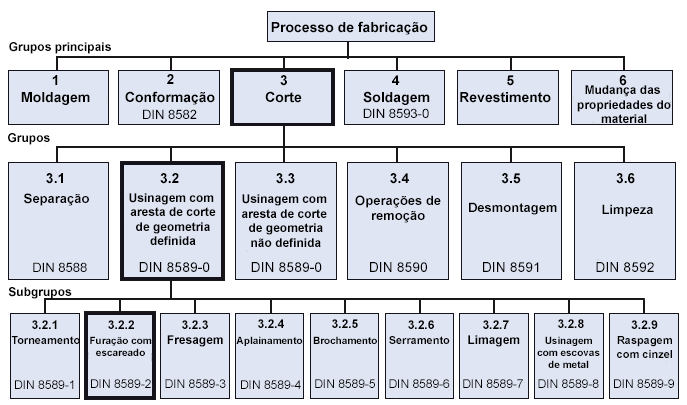
<style>
.page{position:relative;width:687px;height:405px;background:#dfe5f2}
.page>*{position:absolute;margin:0}
.t1{font:14px "Arial-BoldMT";color:#000000}
.t2{font:12px "Arial-BoldMT";color:#000000}
.t3{font:13px "ArialMT";color:#000000}
.t4{font:13px "Arial-BoldMT";color:#000000}
.t5{font:14px "ArialMT";color:#000000}
.t6{font:11px "Arial-BoldMT";color:#000000}
.t7{font:10px "Arial-BoldMT";color:#000000}
.t8{font:12px "ArialMT";color:#000000}
</style>
<div class="page">
<p class="t1" style="left:271px;top:21px;width:157px;height:14px">Processo de fabricação</p>
<p class="t2" style="left:9px;top:42px;width:102px;height:12px">Grupos principais</p>
<p class="t1" style="left:52px;top:75px;width:6px;height:10px">1</p>
<p class="t1" style="left:167px;top:74px;width:7px;height:10px">2</p>
<p class="t1" style="left:280px;top:75px;width:7px;height:11px">3</p>
<p class="t1" style="left:392px;top:75px;width:8px;height:10px">4</p>
<p class="t1" style="left:507px;top:75px;width:7px;height:11px">5</p>
<p class="t1" style="left:619px;top:75px;width:8px;height:11px">6</p>
<p class="t2" style="left:577px;top:85px;width:94px;height:38px;text-align:center">Mudança das <br>propriedades do<br>material</p>
<p class="t1" style="left:21px;top:92px;width:69px;height:13px">Moldagem</p>
<p class="t1" style="left:125px;top:91px;width:90px;height:14px">Conformação</p>
<p class="t1" style="left:265px;top:91px;width:37px;height:12px">Corte</p>
<p class="t1" style="left:363px;top:91px;width:67px;height:14px">Soldagem</p>
<p class="t1" style="left:460px;top:92px;width:91px;height:11px">Revestimento</p>
<p class="t3" style="left:143px;top:109px;width:54px;height:10px">DIN 8582</p>
<p class="t3" style="left:363px;top:108px;width:66px;height:10px">DIN 8593-0</p>
<p class="t2" style="left:8px;top:133px;width:42px;height:12px">Grupos</p>
<p class="t1" style="left:46px;top:173px;width:17px;height:11px">3.1</p>
<p class="t1" style="left:160px;top:173px;width:19px;height:11px">3.2</p>
<p class="t1" style="left:276px;top:173px;width:19px;height:11px">3.3</p>
<p class="t1" style="left:390px;top:173px;width:19px;height:11px">3.4</p>
<p class="t1" style="left:501px;top:173px;width:20px;height:11px">3.5</p>
<p class="t1" style="left:616px;top:173px;width:19px;height:11px">3.6</p>
<p class="t4" style="left:24px;top:193px;width:65px;height:13px">Separação</p>
<p class="t2" style="left:129px;top:193px;width:87px;height:52px;text-align:center">Usinagem com <br>aresta de corte<br>de geometria<br>definida</p>
<p class="t2" style="left:242px;top:194px;width:85px;height:53px;text-align:center">Usinagem com <br>aresta de corte <br>de geometria<br>não definida</p>
<p class="t4" style="left:355px;top:195px;width:86px;height:28px;text-align:center">Operações de<br>remoção</p>
<p class="t4" style="left:469px;top:202px;width:88px;height:13px">Desmontagem</p>
<p class="t4" style="left:602px;top:204px;width:51px;height:13px">Limpeza</p>
<p class="t3" style="left:33px;top:262px;width:54px;height:10px">DIN 8588</p>
<p class="t5" style="left:139px;top:262px;width:71px;height:10px">DIN 8589-0</p>
<p class="t5" style="left:251px;top:262px;width:71px;height:10px">DIN 8589-0</p>
<p class="t5" style="left:370px;top:262px;width:57px;height:10px">DIN 8590</p>
<p class="t5" style="left:483px;top:262px;width:56px;height:10px">DIN 8591</p>
<p class="t5" style="left:596px;top:262px;width:58px;height:10px">DIN 8592</p>
<p class="t2" style="left:8px;top:287px;width:64px;height:12px">Subgrupos</p>
<p class="t2" style="left:32px;top:320px;width:25px;height:9px">3.2.1</p>
<p class="t2" style="left:108px;top:320px;width:26px;height:9px">3.2.2</p>
<p class="t2" style="left:182px;top:320px;width:26px;height:9px">3.2.3</p>
<p class="t2" style="left:258px;top:319px;width:26px;height:9px">3.2.4</p>
<p class="t2" style="left:332px;top:319px;width:26px;height:9px">3.2.5</p>
<p class="t2" style="left:408px;top:320px;width:26px;height:9px">3.2.6</p>
<p class="t2" style="left:483px;top:320px;width:26px;height:9px">3.2.7</p>
<p class="t2" style="left:558px;top:319px;width:26px;height:9px">3.2.8</p>
<p class="t2" style="left:631px;top:320px;width:27px;height:9px">3.2.9</p>
<p class="t6" style="left:11px;top:336px;width:69px;height:8px">Torneamento</p>
<p class="t7" style="left:90px;top:336px;width:62px;height:20px;text-align:center">Furação com<br>escareado</p>
<p class="t2" style="left:167px;top:335px;width:56px;height:12px">Fresagem</p>
<p class="t7" style="left:236px;top:336px;width:67px;height:10px">Aplainamento</p>
<p class="t7" style="left:313px;top:336px;width:64px;height:8px">Brochamento</p>
<p class="t6" style="left:389px;top:336px;width:61px;height:8px">Serramento</p>
<p class="t2" style="left:468px;top:335px;width:52px;height:12px">Limagem</p>
<p class="t7" style="left:537px;top:336px;width:63px;height:32px;text-align:center">Usinagem<br>com escovas<br>de metal</p>
<p class="t6" style="left:617px;top:336px;width:55px;height:22px;text-align:center">Raspagem<br>com cinzel</p>
<p class="t8" style="left:15px;top:380px;width:59px;height:9px">DIN 8589-1</p>
<p class="t8" style="left:91px;top:379px;width:60px;height:9px">DIN 8589-2</p>
<p class="t8" style="left:165px;top:379px;width:61px;height:9px">DIN 8589-3</p>
<p class="t8" style="left:241px;top:380px;width:60px;height:9px">DIN 8589-4</p>
<p class="t8" style="left:315px;top:379px;width:60px;height:9px">DIN 8589-5</p>
<p class="t8" style="left:389px;top:379px;width:61px;height:9px">DIN 8589-6</p>
<p class="t8" style="left:463px;top:379px;width:60px;height:9px">DIN 8589-7</p>
<p class="t8" style="left:538px;top:379px;width:61px;height:9px">DIN 8589-8</p>
<p class="t8" style="left:614px;top:379px;width:60px;height:9px">DIN 8589-9</p>
</div>
